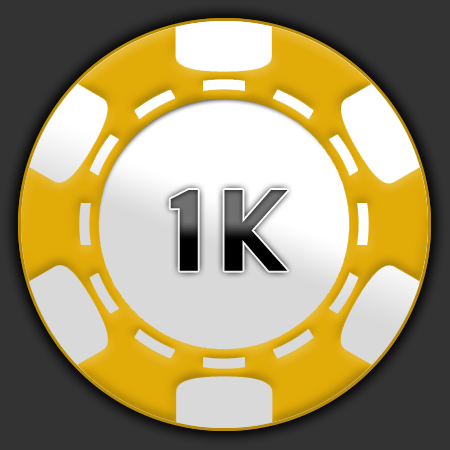
<style>
.page{position:relative;width:450px;height:450px;background:#333333}
.page>*{position:absolute;margin:0}
.t1{font:107.3px "Krungthep"}
</style>
<div class="page">
<p class="t1" style="left:170px;top:190px;width:118px;height:81px">1K</p>
</div>
